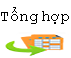
<style>
.page{position:relative;width:71px;height:58px;background:#ffffff}
.page>*{position:absolute;margin:0}
.t1{font:16px "CourierNewPSMT";letter-spacing:-0.005em;color:#000000}
</style>
<div class="page">
<p class="t1" style="left:1px;top:7px;width:68px;height:17px">Tổng hợp</p>
</div>
